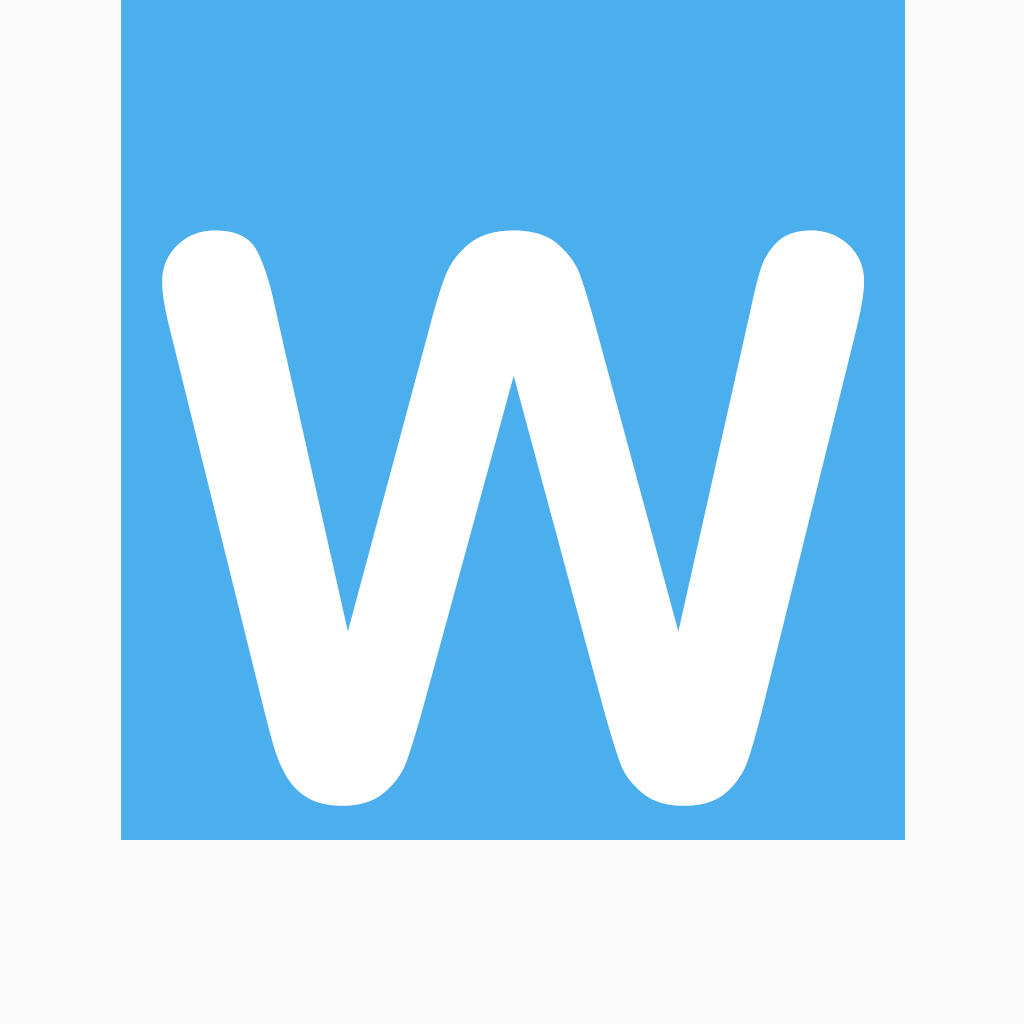
<style>
.page{position:relative;width:1024px;height:1024px;background:#4bafee}
.page>*{position:absolute;margin:0}
.t1{font:776.8px "ArialRoundedMTBold";color:#ffffff}
</style>
<div class="page">
<p class="t1" style="left:162px;top:230px;width:702px;height:576px">W</p>
</div>
